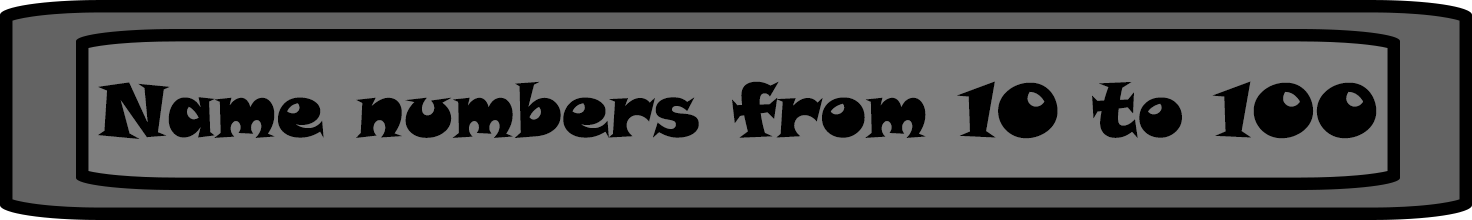
<style>
.page{position:relative;width:1472px;height:220px;background:#7e7e7e}
.page>*{position:absolute;margin:0}
.t1{font:75px "SnapITC-Regular";color:#000000}
</style>
<div class="page">
<p class="t1" style="left:98px;top:81px;width:1279px;height:58px">Name numbers from 10 to 100</p>
</div>
